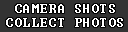
<style>
.page{position:relative;width:128px;height:32px;background:#333333}
.page>*{position:absolute;margin:0}
.t1{font:12px/14px "Terminal";letter-spacing:0.1em;color:#ffffff}
</style>
<div class="page">
<p class="t1" style="left:6px;top:4px;width:117px;height:23px;text-align:center">CAMERA SHOTS<br>COLLECT PHOTOS</p>
</div>
